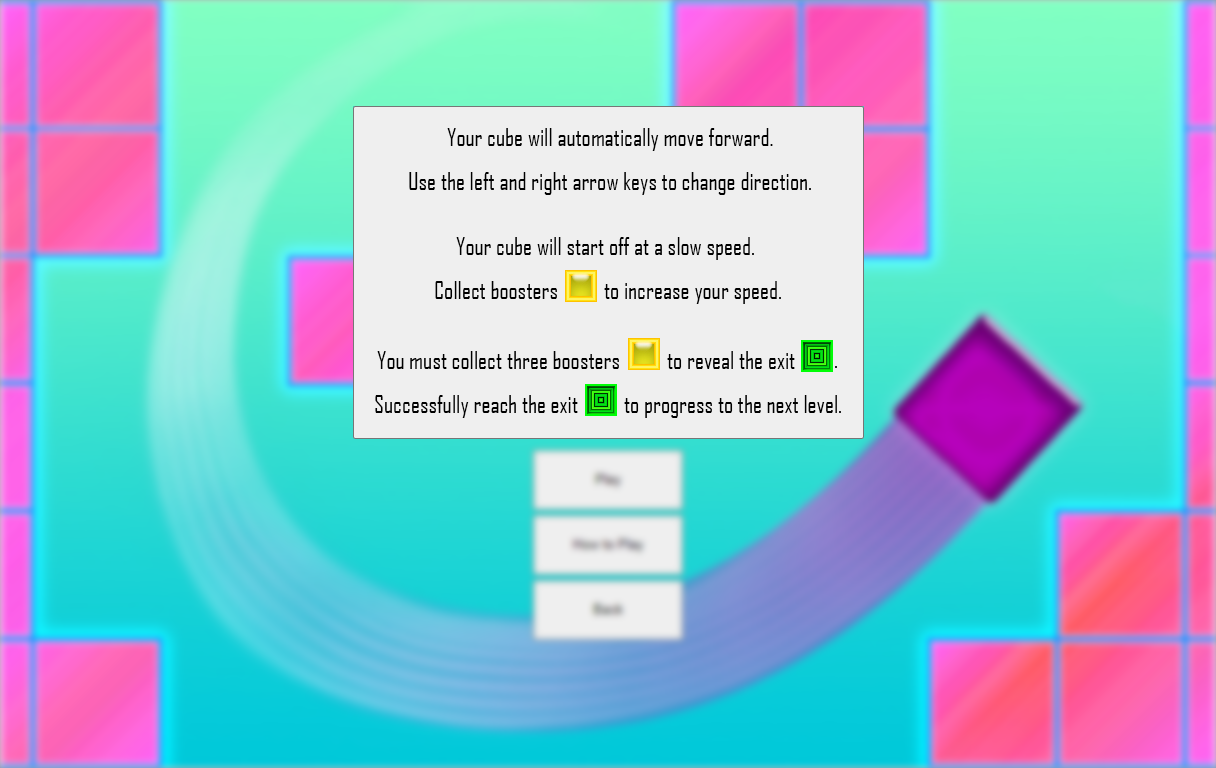
<style>
.page{position:relative;width:1216px;height:768px}
.page>*{position:absolute;margin:0}
.t1{font:24px "AgencyFB-Reg";color:#000000}
</style>
<div class="page">
<p class="t1" style="left:447px;top:128px;width:326px;height:23px">Your cube will automatically move forward.</p>
<p class="t1" style="left:409px;top:172px;width:402px;height:23px">Use the left and right arrow keys to change direction.</p>
<p class="t1" style="left:456px;top:237px;width:298px;height:23px">Your cube will start off at a slow speed.</p>
<p class="t1" style="left:435px;top:281px;width:122px;height:18px">Collect boosters</p>
<p class="t1" style="left:604px;top:281px;width:177px;height:23px">to increase your speed.</p>
<p class="t1" style="left:377px;top:351px;width:242px;height:18px">You must collect three boosters</p>
<p class="t1" style="left:667px;top:351px;width:128px;height:18px">to reveal the exit</p>
<p class="t1" style="left:375px;top:395px;width:203px;height:23px">Successfully reach the exit</p>
<p class="t1" style="left:624px;top:395px;width:217px;height:23px">to progress to the next level.</p>
</div>
